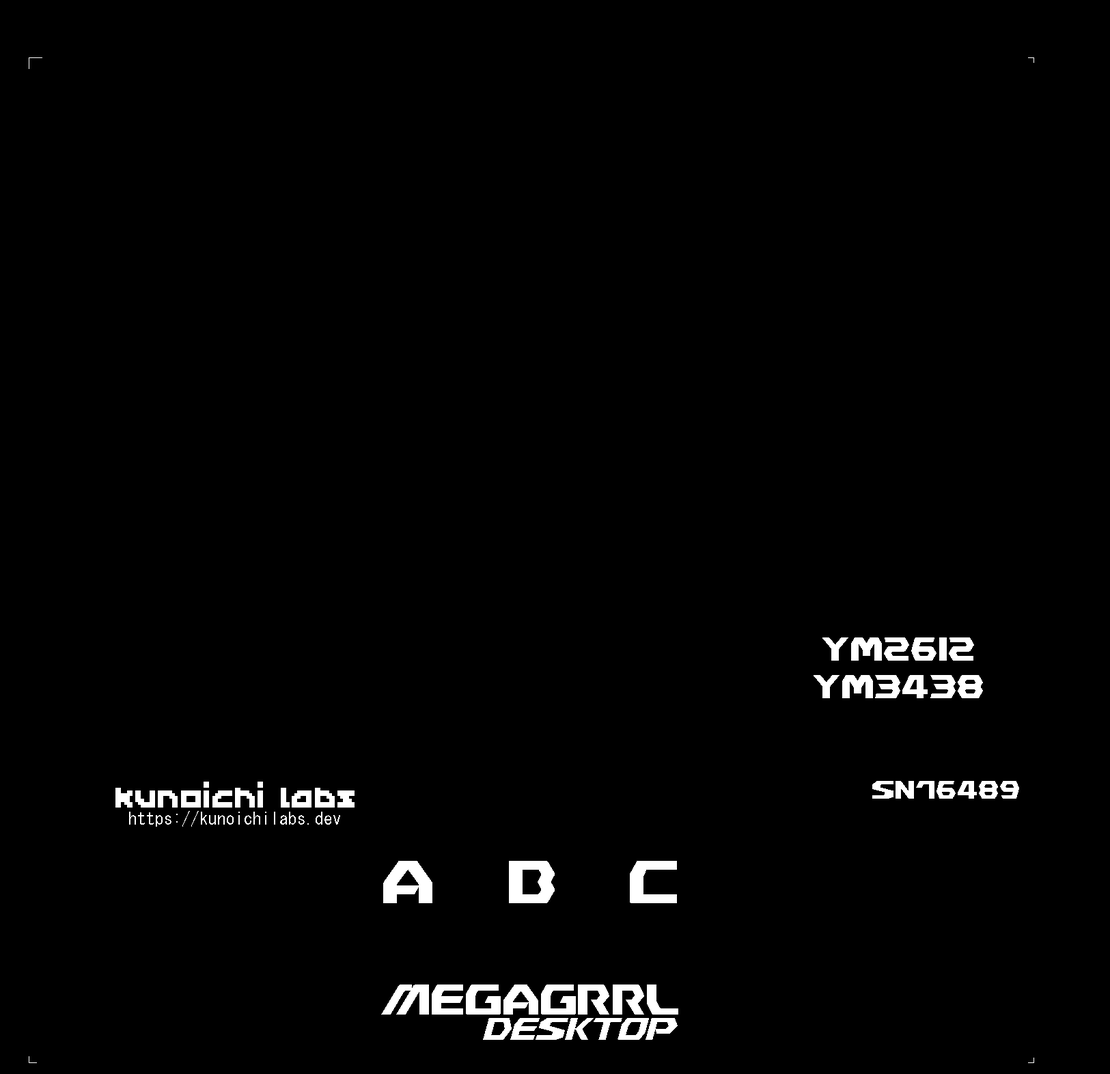
<style>
.page{position:relative;width:1110px;height:1074px;background:#000000}
.page>*{position:absolute;margin:0}
.t1{font:31.3px "NiseMegaDrive";color:#ffffff}
.t2{font:45.5px "Kapel";color:#ffffff}
.t3{font:23.9px "NiseMegaDrive";color:#ffffff}
.t4{font:17.1px "MS-Gothic";color:#ffffff}
.t5{font:56.9px "NiseMegaDrive";color:#ffffff}
.t6{font:39.9px "NiseMegaDrive";color:#ffffff}
.t7{font:30.9px "NiseMegaDrive";color:#ffffff;scale:0.96 1}
</style>
<div class="page">
<p class="t1" style="left:814px;top:637px;width:169px;height:61px;text-align:center">y$26i2<br>y$3438</p>
<p class="t2" style="left:115px;top:782px;width:240px;height:26px">kunoichi labs</p>
<p class="t3" style="left:872px;top:781px;width:147px;height:18px">sn76489</p>
<p class="t4" style="left:129px;top:811px;width:211px;height:16px">https://kunoichilabs.dev</p>
<p class="t5" style="left:383px;top:861px;width:49px;height:42px">#</p>
<p class="t5" style="left:509px;top:861px;width:46px;height:42px">b</p>
<p class="t5" style="left:630px;top:861px;width:47px;height:42px">c</p>
<p class="t6" style="left:381px;top:985px;width:297px;height:30px">Meg#grrl</p>
<p class="t7" style="left:483px;top:1018px;width:29px;height:22px">d</p>
<p class="t7" style="left:510px;top:1018px;width:84px;height:22px">esk</p>
<p class="t7" style="left:594px;top:1018px;width:28px;height:22px">t</p>
<p class="t7" style="left:618px;top:1018px;width:60px;height:22px">op</p>
</div>
